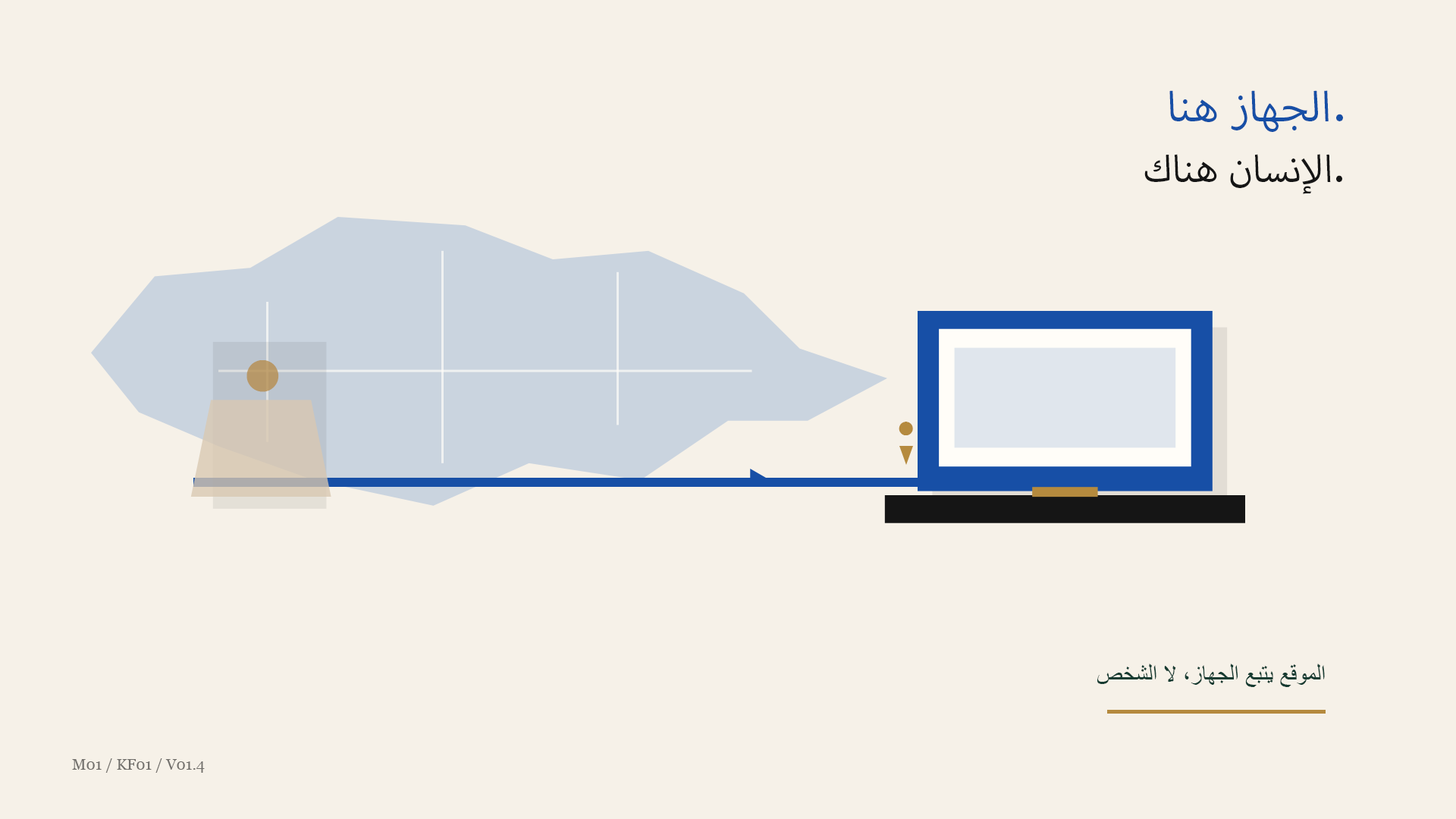
<style>
.page{position:relative;width:1456px;height:819px;background:#f6f1e8}
.page>*{position:absolute;margin:0}
.t1{font:59.1px "MyriadArabic-Regular";color:#174fa6}
.t2{font:53.1px "MyriadArabic-Regular";color:#151515}
.t3{font:73.4px "ArialMT";color:#b79868}
.t4{font:31.8px "ArialMT";color:#b58a3e}
.t5{font:23.5px "ArialMT";color:#173c32}
.t6{font:15.2px "Georgia";color:#716f6b}
</style>
<div class="page">
<p class="t1" style="left:1169px;top:90px;width:174px;height:42px">الجهاز هنا.</p>
<p class="t2" style="left:1144px;top:154px;width:198px;height:40px">الإنسان هناك.</p>
<p class="t3" style="left:246px;top:360px;width:33px;height:32px">●</p>
<p class="t4" style="left:899px;top:422px;width:14px;height:13px">●</p>
<p class="t5" style="left:1097px;top:664px;width:228px;height:23px">الموقع يتبع الجهاز، لا الشخص</p>
<p class="t6" style="left:72px;top:758px;width:133px;height:15px">M01 / KF01 / V01.4</p>
</div>
